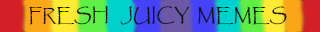
<style>
.page{position:relative;width:320px;height:32px}
.page>*{position:absolute;margin:0}
.t1{font:18px "Papyrus-Regular";color:#100e0f}
</style>
<div class="page">
<p class="t1" style="left:29px;top:6px;width:258px;height:19px">FRESH   JUICY  MEMES</p>
</div>
